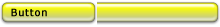
<style>
.page{position:relative;width:220px;height:27px}
.page>*{position:absolute;margin:0}
.t1{font:10px "Verdana";letter-spacing:0.08em;color:#000000;font-weight:bold;scale:0.95 1}
</style>
<div class="page">
<p class="t1" style="left:11px;top:8px;width:36px;height:9px">Button</p>
</div>
